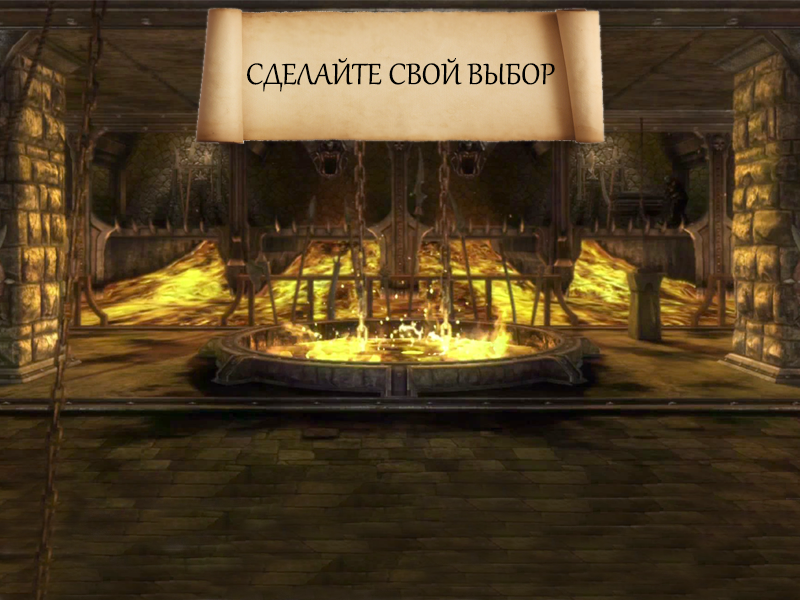
<style>
.page{position:relative;width:800px;height:600px}
.page>*{position:absolute;margin:0}
.t1{font:36px "Gabriola";color:#000000;text-transform:uppercase}
</style>
<div class="page">
<p class="t1" style="left:247px;top:58px;width:308px;height:34px">Сделайте свой выбор</p>
</div>
